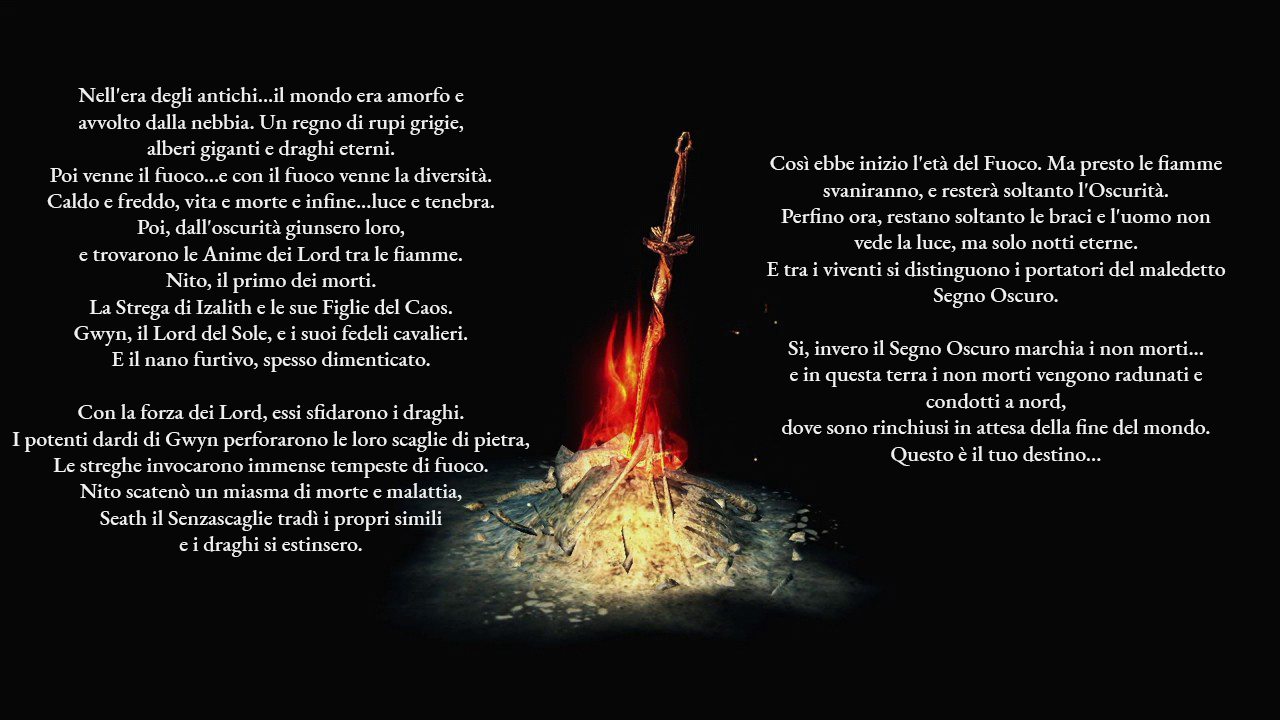
<style>
.page{position:relative;width:1280px;height:720px;background:#060606}
.page>*{position:absolute;margin:0}
.t1{font:22px "EBGaramond-Medium";color:#f0f0f0}
</style>
<div class="page">
<p class="t1" style="left:12px;top:87px;width:518px;height:470px;text-align:center">Nell'era degli antichi...il mondo era amorfo e <br>avvolto dalla nebbia. Un regno di rupi grigie, <br>alberi giganti e draghi eterni.<br>Poi venne il fuoco...e con il fuoco venne la diversità. <br>Caldo e freddo, vita e morte e infine...luce e tenebra.<br>Poi, dall'oscurità giunsero loro, <br>e trovarono le Anime dei Lord tra le fiamme.<br>Nito, il primo dei morti.<br>La Strega di Izalith e le sue Figlie del Caos.<br>Gwyn, il Lord del Sole, e i suoi fedeli cavalieri.<br>E il nano furtivo, spesso dimenticato.<br><br>Con la forza dei Lord, essi sfidarono i draghi.<br>I potenti dardi di Gwyn perforarono le loro scaglie di pietra,<br>Le streghe invocarono immense tempeste di fuoco.<br>Nito scatenò un miasma di morte e malattia,<br>Seath il Senzascaglie tradì i propri simili <br>e i draghi si estinsero.</p>
<p class="t1" style="left:766px;top:155px;width:460px;height:311px;text-align:center">Così ebbe inizio l'età del Fuoco. Ma presto le fiamme svaniranno, e resterà soltanto l'Oscurità.<br>Perfino ora, restano soltanto le braci e l'uomo non vede la luce, ma solo notti eterne.<br>E tra i viventi si distinguono i portatori del maledetto Segno Oscuro.<br><br>Si, invero il Segno Oscuro marchia i non morti...<br>e in questa terra i non morti vengono radunati e condotti a nord,<br>dove sono rinchiusi in attesa della fine del mondo.<br>Questo è il tuo destino...</p>
</div>
